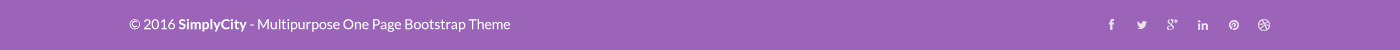
<style>
.page{position:relative;width:1400px;height:50px;background:#9b64b8}
.page>*{position:absolute;margin:0}
.t1{font:14px "Lato-Regular";color:#ffffff}
.t2{font:14px "Lato-Bold";color:#ffffff}
</style>
<div class="page">
<p class="t1" style="left:129px;top:19px;width:381px;height:13px">© 2016 <span class="t2">SimplyCity</span> - Multipurpose One Page Bootstrap Theme</p>
</div>
